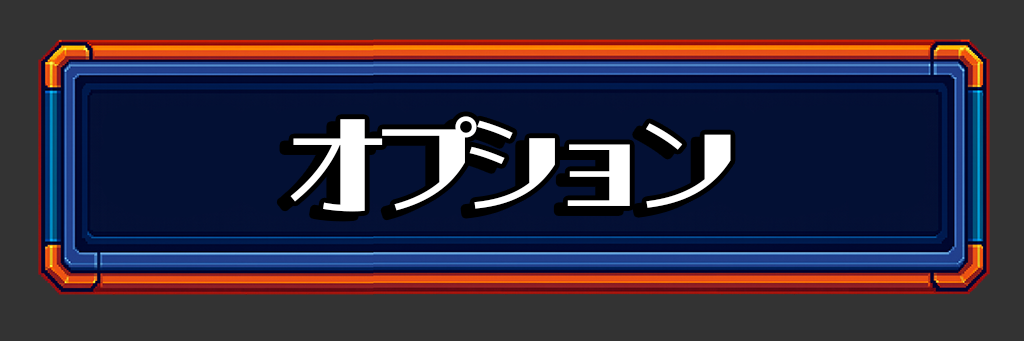
<style>
.page{position:relative;width:1024px;height:341px;background:#333333}
.page>*{position:absolute;margin:0}
.t1{font:106.3px "AB-lineboard_bold";letter-spacing:-0.18em;color:#ffffff}
</style>
<div class="page">
<p class="t1" style="left:290px;top:116px;width:441px;height:96px">オプション</p>
</div>
